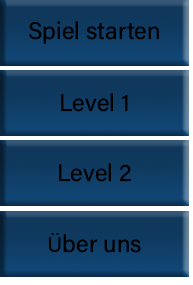
<style>
.page{position:relative;width:193px;height:285px}
.page>*{position:absolute;margin:0}
.t1{font:24px "AcuminConcept-Regular";color:#000000}
.t2{font:24px "Calibri";color:#000000}
</style>
<div class="page">
<p class="t1" style="left:29px;top:21px;width:130px;height:23px">Spiel starten</p>
<p class="t1" style="left:61px;top:93px;width:67px;height:19px">Level 1</p>
<p class="t1" style="left:59px;top:163px;width:72px;height:19px">Level 2</p>
<p class="t1" style="left:48px;top:233px;width:93px;height:20px"><span class="t2">Ü</span>ber uns</p>
</div>
